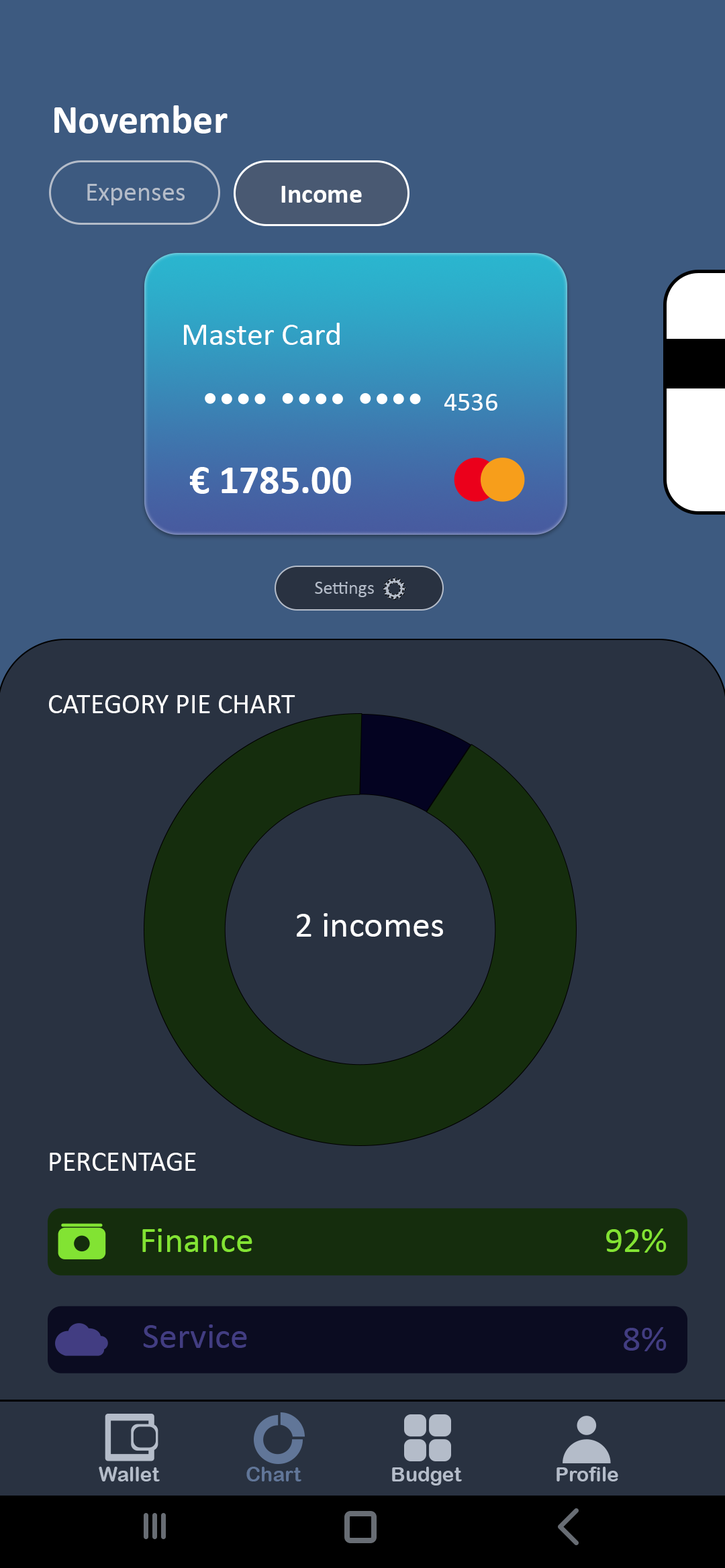
<style>
.page{position:relative;width:725px;height:1568px;background:#293241}
.page>*{position:absolute;margin:0}
.t1{font:40.3px "Calibri-Bold";color:#ffffff}
.t2{font:26.8px "Calibri";color:#b4bcc9}
.t3{font:26.8px "Calibri-Bold";color:#ffffff}
.t4{font:32.2px "Calibri";color:#ffffff}
.t5{font:26.8px "Calibri";color:#ffffff}
.t6{font:18.8px "Calibri";color:#b4bcc9}
.t7{font:28.2px "Calibri";color:#ffffff}
.t8{font:36.3px "Calibri";color:#ffffff}
.t9{font:36.4px "Calibri";color:#82e333}
.t10{font:36.4px "Calibri";color:#423d82}
.t11{font:20.1px "ArialRoundedMTBold";color:#b4bcc9}
.t12{font:20.1px "ArialRoundedMTBold";color:#617698}
</style>
<div class="page">
<p class="t1" style="left:54px;top:105px;width:173px;height:29px">November</p>
<p class="t2" style="left:87px;top:184px;width:98px;height:21px">Expenses</p>
<p class="t3" style="left:281px;top:186px;width:81px;height:17px">Income</p>
<p class="t4" style="left:184px;top:323px;width:155px;height:22px">Master Card</p>
<p class="t5" style="left:443px;top:394px;width:54px;height:17px">4536</p>
<p class="t1" style="left:189px;top:467px;width:162px;height:27px">€ 1785.00</p>
<p class="t6" style="left:315px;top:582px;width:59px;height:15px">Settings</p>
<p class="t7" style="left:49px;top:695px;width:246px;height:18px">CATEGORY PIE CHART</p>
<p class="t8" style="left:297px;top:913px;width:146px;height:24px">2 incomes</p>
<p class="t7" style="left:50px;top:1153px;width:146px;height:18px">PERCENTAGE</p>
<p class="t9" style="left:142px;top:1229px;width:110px;height:23px">Finance</p>
<p class="t9" style="left:606px;top:1229px;width:60px;height:24px">92%</p>
<p class="t10" style="left:143px;top:1324px;width:104px;height:24px">Service</p>
<p class="t10" style="left:623px;top:1327px;width:43px;height:24px">8%</p>
<p class="t11" style="left:99px;top:1467px;width:61px;height:14px">Wallet</p>
<p class="t12" style="left:246px;top:1467px;width:55px;height:14px">Chart</p>
<p class="t11" style="left:392px;top:1467px;width:70px;height:18px">Budget</p>
<p class="t11" style="left:556px;top:1467px;width:62px;height:14px">Profile</p>
</div>
